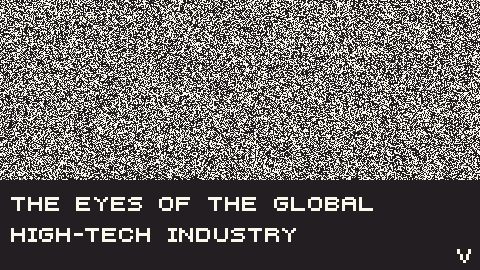
<style>
.page{position:relative;width:480px;height:270px;background:#201b1e}
.page>*{position:absolute;margin:0}
.t1{font:45.7px/30.5px "Five";color:#ffffff;text-transform:uppercase}
.t2{font:45.7px "Five";color:#ffffff;text-transform:uppercase}
</style>
<div class="page">
<p class="t1" style="left:11px;top:197px;width:362px;height:45px">The eyes of the global <br>high-tech industry</p>
<p class="t2" style="left:457px;top:249px;width:14px;height:14px">V</p>
</div>
